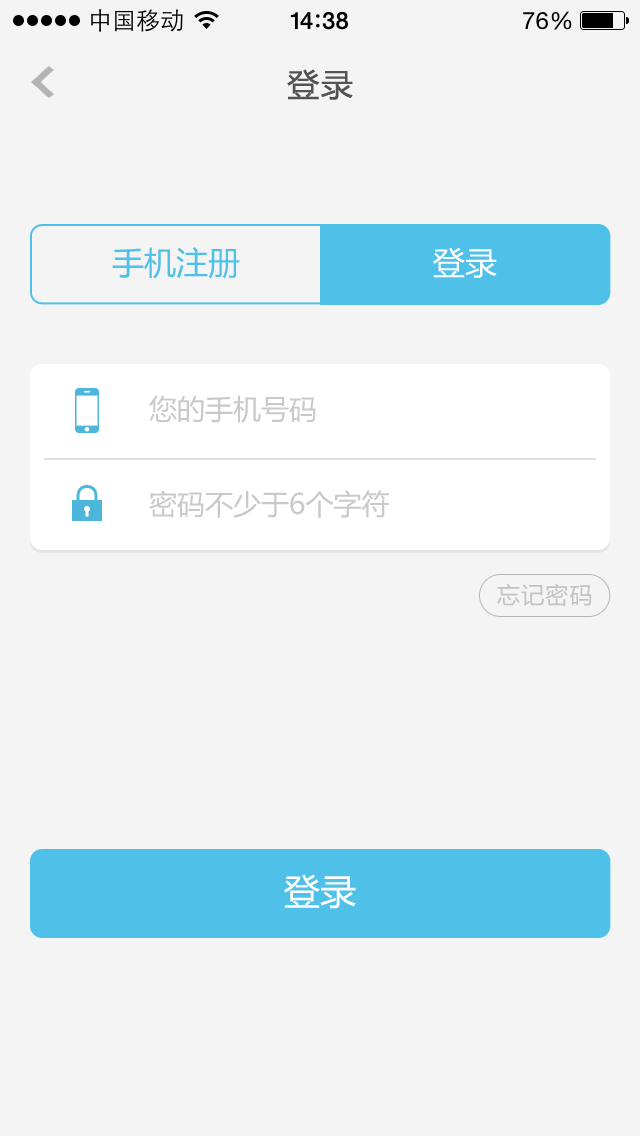
<style>
.page{position:relative;width:640px;height:1136px;background:#f4f4f4}
.page>*{position:absolute;margin:0}
.t1{font:32px "MicrosoftYaHei";letter-spacing:0.05em;color:#535353}
.t2{font:32px "MicrosoftYaHei";color:#4fc1e9}
.t3{font:32px "MicrosoftYaHei";color:#ffffff}
.t4{font:28px "MicrosoftYaHei";color:#c9c9c9}
.t5{font:23px "MicrosoftYaHei";letter-spacing:0.05em;color:#c3c1c1}
.t6{font:36px "MicrosoftYaHei";color:#ffffff}
</style>
<div class="page">
<p class="t1" style="left:287px;top:69px;width:66px;height:31px">登录</p>
<p class="t2" style="left:112px;top:247px;width:128px;height:32px">手机注册</p>
<p class="t3" style="left:433px;top:247px;width:64px;height:31px">登录</p>
<p class="t4" style="left:149px;top:395px;width:167px;height:28px">您的手机号码</p>
<p class="t4" style="left:149px;top:490px;width:240px;height:28px">密码不少于6个字符</p>
<p class="t5" style="left:497px;top:583px;width:95px;height:24px">忘记密码</p>
<p class="t6" style="left:284px;top:874px;width:72px;height:35px">登录</p>
</div>
